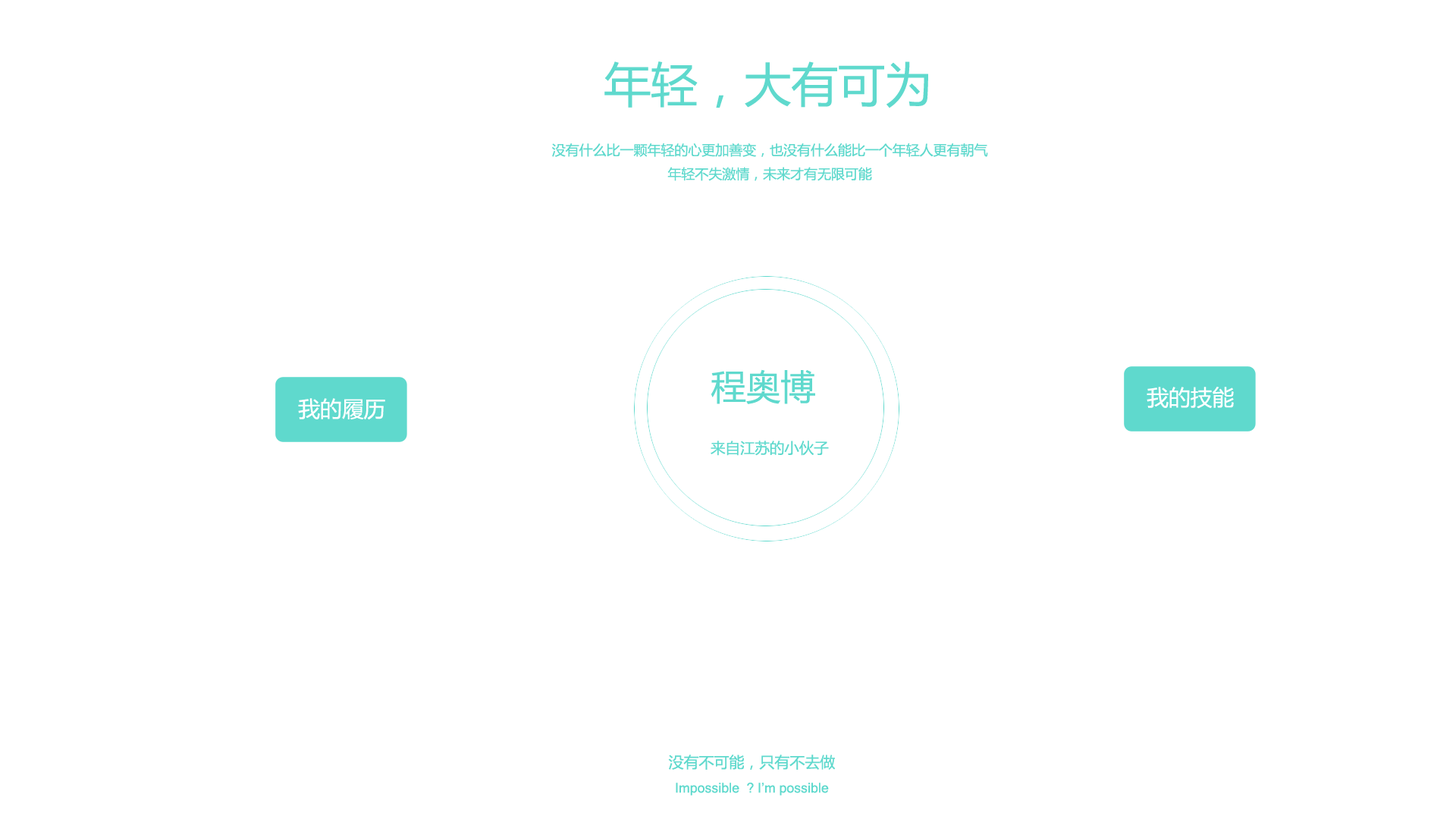
<style>
.page{position:relative;width:1456px;height:819px;background:#ffffff}
.page>*{position:absolute;margin:0}
.t1{font:46.8px "MicrosoftYaHei";color:#5fd9cd}
.t2{font:13.6px "MicrosoftYaHei";color:#5fd9cd}
.t3{font:34.8px "MicrosoftYaHei";color:#5fd9cd}
.t4{font:21.8px "MicrosoftYaHei";color:#ffffff}
.t5{font:14.8px "MicrosoftYaHei";color:#5fd9cd}
.t6{font:13.5px "MicrosoftSansSerif";color:#5fd9cd}
.t7{font:15.1px "MicrosoftYaHei";color:#5fd9cd}
</style>
<div class="page">
<p class="t1" style="left:604px;top:61px;width:324px;height:47px">年轻，大有可为</p>
<p class="t2" style="left:552px;top:143px;width:436px;height:38px;text-align:center">没有什么比一颗年轻的心更加善变，也没有什么能比一个年轻人更有朝气<br>年轻不失激情，未来才有无限可能</p>
<p class="t3" style="left:711px;top:369px;width:104px;height:35px">程奥博</p>
<p class="t4" style="left:1147px;top:387px;width:87px;height:22px">我的技能</p>
<p class="t4" style="left:298px;top:398px;width:87px;height:22px">我的履历</p>
<p class="t5" style="left:711px;top:441px;width:118px;height:15px">来自江苏的小伙子</p>
<p class="t6" style="left:668px;top:755px;width:168px;height:40px;text-align:center"><span class="t7">没有不可能，只有不去做<br></span>Impossible  ? I’m possible</p>
</div>
